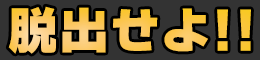
<style>
.page{position:relative;width:260px;height:60px;background:#333333}
.page>*{position:absolute;margin:0}
.t1{font:50px "WanpakuRuika-08";letter-spacing:0.029em}
</style>
<div class="page">
<p class="t1" style="left:8px;top:6px;width:243px;height:48px">脱出せよ!!</p>
</div>
